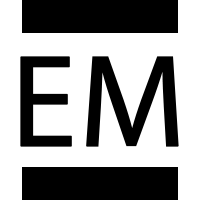
<style>
.page{position:relative;width:200px;height:200px;background:#ffffff}
.page>*{position:absolute;margin:0}
.t1{font:132.5px "MyriadPro-Regular";color:#000000;font-weight:bold}
</style>
<div class="page">
<p class="t1" style="left:20px;top:56px;width:159px;height:91px">EM</p>
</div>
